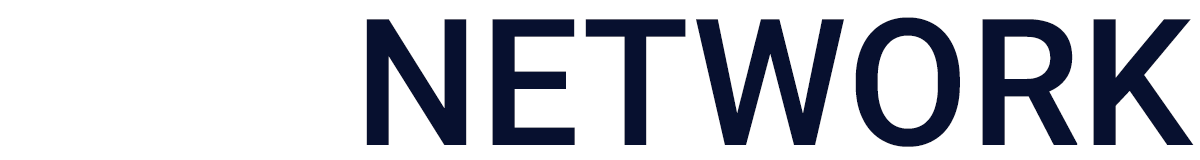
<style>
.page{position:relative;width:1200px;height:160px;background:#ffffff}
.page>*{position:absolute;margin:0}
.t1{font:176.7px "Roboto-Medium";letter-spacing:0.005em;color:#07102f;font-variant:small-caps}
.t2{font:176.7px "Roboto-Medium";letter-spacing:0.005em;color:#ffffff;font-variant:small-caps}
</style>
<div class="page">
<p class="t1" style="left:8px;top:17px;width:1186px;height:130px"><span class="t2">FLIX</span>NETWORK</p>
</div>
